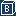
<style>
.page{position:relative;width:16px;height:16px;background:#193b61}
.page>*{position:absolute;margin:0}
.t1{font:15px "Baby-blocks";color:#ffffff}
</style>
<div class="page">
<p class="t1" style="left:1px;top:0px;width:15px;height:15px">B</p>
</div>
